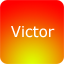
<style>
.page{position:relative;width:64px;height:64px}
.page>*{position:absolute;margin:0}
.t1{font:14.9px "Verdana";color:#ffffff}
</style>
<div class="page">
<p class="t1" style="left:11px;top:26px;width:44px;height:12px">Victor</p>
</div>
